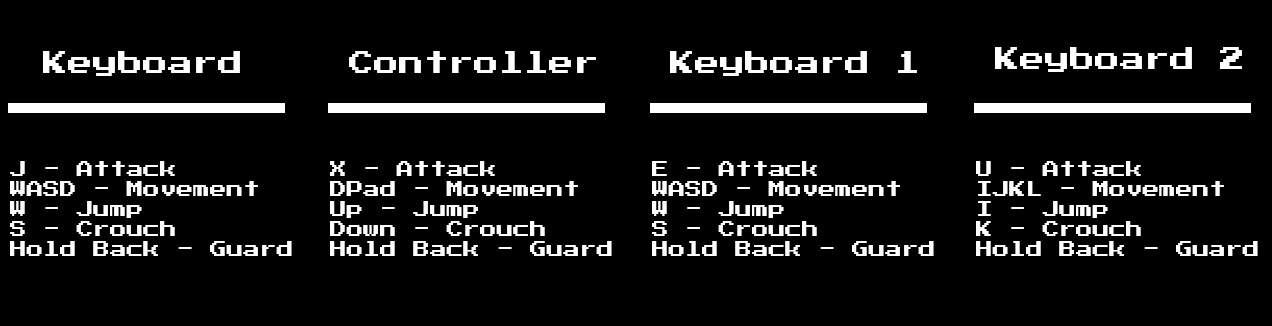
<style>
.page{position:relative;width:1272px;height:326px;background:#000000}
.page>*{position:absolute;margin:0}
.t1{font:25px "PressStart2P-Regular";color:#ffffff}
.t2{font:16.7px "PressStart2P-Regular";color:#ffffff}
</style>
<div class="page">
<p class="t1" style="left:43px;top:51px;width:197px;height:25px">Keyboard</p>
<p class="t1" style="left:349px;top:51px;width:247px;height:22px">Controller</p>
<p class="t1" style="left:670px;top:51px;width:247px;height:25px">Keyboard 1</p>
<p class="t1" style="left:995px;top:47px;width:247px;height:25px">Keyboard 2</p>
<p class="t2" style="left:10px;top:161px;width:282px;height:95px">J - Attack<br>WASD - Movement<br>W - Jump<br>S - Crouch<br>Hold Back - Guard</p>
<p class="t2" style="left:330px;top:161px;width:282px;height:95px">X - Attack<br>DPad - Movement<br>Up - Jump<br>Down - Crouch<br>Hold Back - Guard</p>
<p class="t2" style="left:652px;top:161px;width:282px;height:95px">E - Attack<br>WASD - Movement<br>W - Jump<br>S - Crouch<br>Hold Back - Guard</p>
<p class="t2" style="left:976px;top:161px;width:282px;height:95px">U - Attack<br>IJKL - Movement<br>I - Jump<br>K - Crouch<br>Hold Back - Guard</p>
</div>
